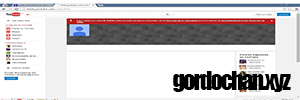
<style>
.page{position:relative;width:300px;height:100px;background:#ffffff}
.page>*{position:absolute;margin:0}
.t1{font:24px "Impact";letter-spacing:-0.08em;color:#000000}
</style>
<div class="page">
<p class="t1" style="left:173px;top:71px;width:118px;height:21px">gordochan.xyz</p>
</div>
